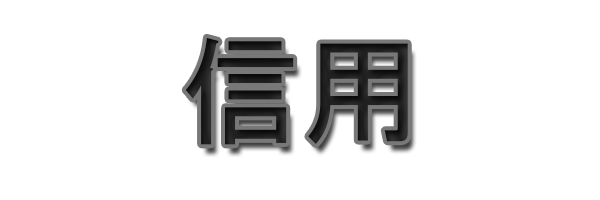
<style>
.page{position:relative;width:600px;height:200px;background:#ffffff}
.page>*{position:absolute;margin:0}
.t1{font:120px "MS-Gothic";color:#1d1d1d}
</style>
<div class="page">
<p class="t1" style="left:185px;top:37px;width:223px;height:108px">信用</p>
</div>
